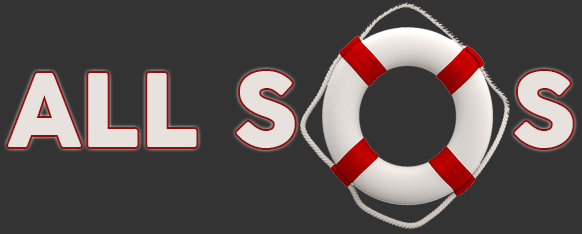
<style>
.page{position:relative;width:582px;height:234px;background:#333333}
.page>*{position:absolute;margin:0}
.t1{font:100px "COCOGOOSE";color:#e7e2de}
</style>
<div class="page">
<p class="t1" style="left:8px;top:73px;width:189px;height:74px">ALL</p>
<p class="t1" style="left:236px;top:71px;width:59px;height:77px">S</p>
<p class="t1" style="left:514px;top:71px;width:59px;height:77px">S</p>
</div>
